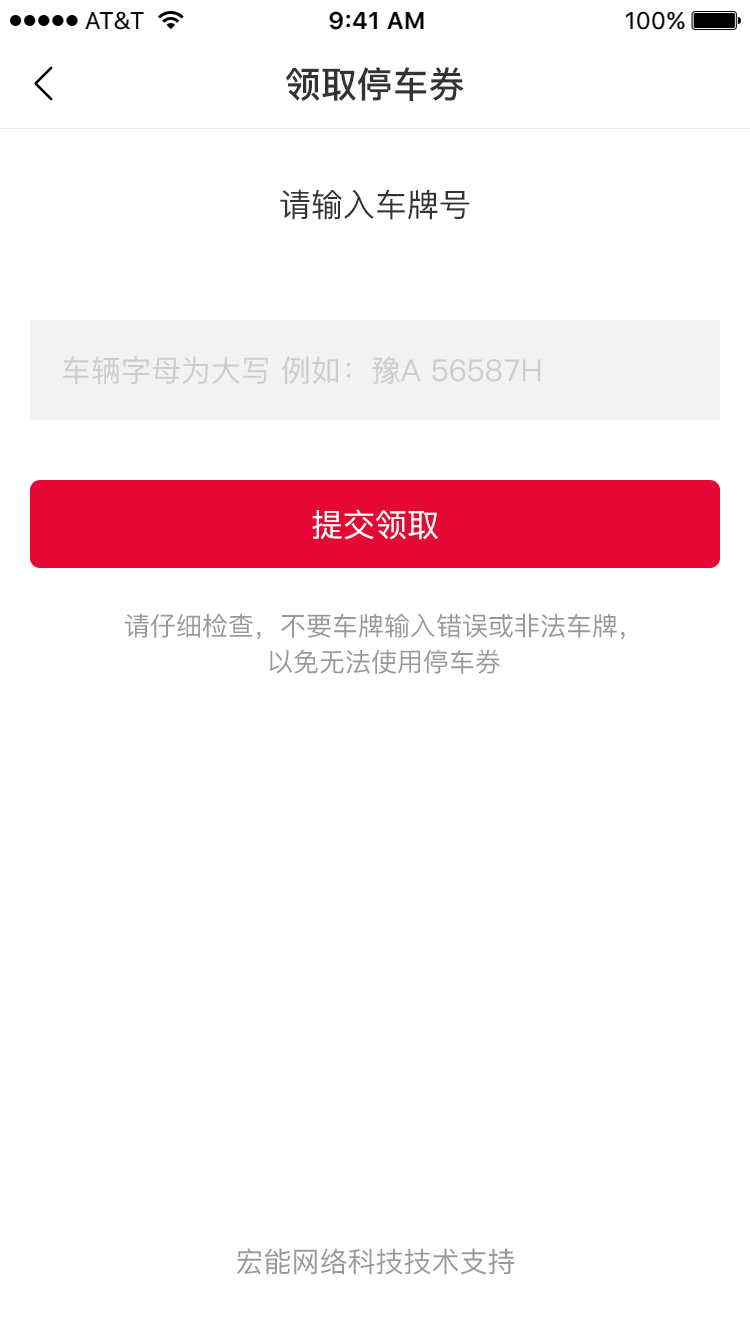
<style>
.page{position:relative;width:750px;height:1334px;background:#ffffff}
.page>*{position:absolute;margin:0}
.t1{font:36px "PingFang-SC-Bold";color:#333333}
.t2{font:32px "PingFang-SC-Medium";color:#333333}
.t3{font:30px "PingFang-SC-Medium";color:#cccccc}
.t4{font:32px "PingFang-SC-Medium";color:#ffffff}
.t5{font:26px/36px "PingFang-SC-Medium";color:#999999}
.t6{font:28px "PingFang-SC-Medium";color:#999999}
</style>
<div class="page">
<p class="t1" style="left:285px;top:67px;width:179px;height:34px">领取停车券</p>
<p class="t2" style="left:280px;top:189px;width:190px;height:31px">请输入车牌号</p>
<p class="t3" style="left:63px;top:356px;width:478px;height:29px">车辆字母为大写 例如：豫A 56587H</p>
<p class="t4" style="left:312px;top:509px;width:126px;height:31px">提交领取</p>
<p class="t5" style="left:125px;top:613px;width:500px;height:61px;text-align:center">请仔细检查，不要车牌输入错误或非法车牌，<br>以免无法使用停车券</p>
<p class="t6" style="left:237px;top:1248px;width:278px;height:27px">宏能网络科技技术支持</p>
</div>
